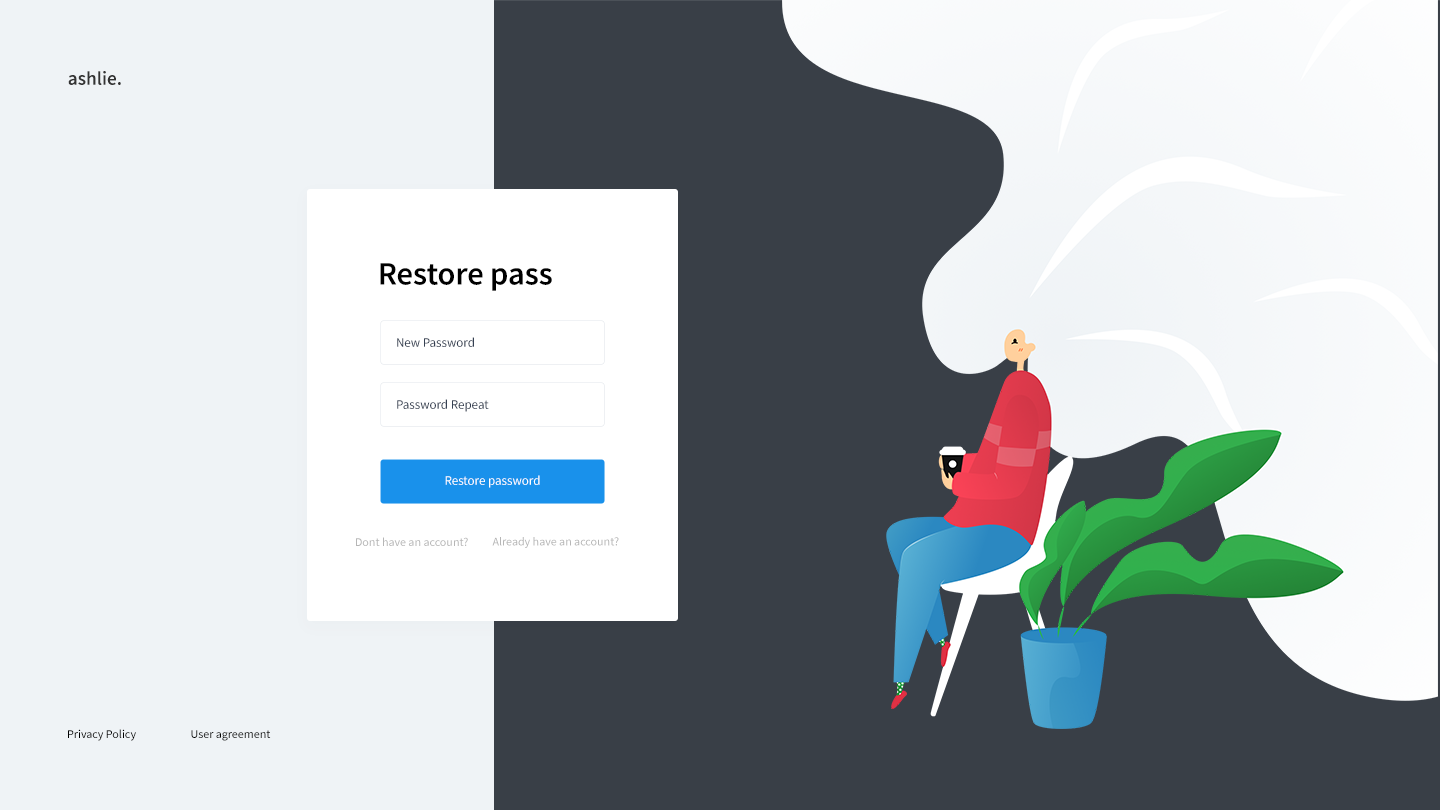
<style>
.page{position:relative;width:1440px;height:810px;background:#393f47}
.page>*{position:absolute;margin:0}
.t1{font:19.3px "SourceSansPro-SemiBold";color:#333333}
.t2{font:32.5px "SourceSansPro-SemiBold";color:#000000}
.t3{font:13px "SourceSansPro-Regular";color:#354052}
.t4{font:13px "SourceSansPro-Regular";color:#ffffff}
.t5{font:12px "SourceSansPro-Regular";color:#b6b6b6}
.t6{font:12px "SourceSansPro-Regular";color:#000000}
</style>
<div class="page">
<p class="t1" style="left:68px;top:71px;width:53px;height:14px">ashlie.</p>
<p class="t2" style="left:380px;top:263px;width:172px;height:28px">Restore pass</p>
<p class="t3" style="left:397px;top:337px;width:77px;height:10px">New Password</p>
<p class="t3" style="left:397px;top:399px;width:92px;height:13px">Password Repeat</p>
<p class="t4" style="left:445px;top:475px;width:95px;height:13px">Restore password</p>
<p class="t5" style="left:356px;top:537px;width:112px;height:9px">Dont have an account?</p>
<p class="t5" style="left:492px;top:537px;width:127px;height:11px">Already have an account?</p>
<p class="t6" style="left:68px;top:729px;width:68px;height:12px">Privacy Policy</p>
<p class="t6" style="left:191px;top:730px;width:80px;height:11px">User agreement</p>
</div>
